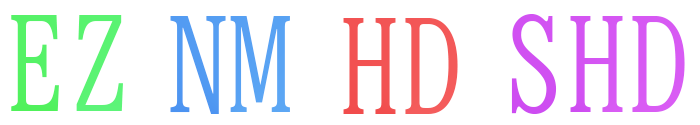
<style>
.page{position:relative;width:700px;height:125px;background:#ffffff}
.page>*{position:absolute;margin:0}
.t1{font:126px "BIZ-UDMincho-Medium";color:#57f26a}
.t2{font:126px "BIZ-UDMincho-Medium";color:#56a0f3}
.t3{font:126px "BIZ-UDMincho-Medium";color:#d556f3}
.t4{font:126px "BIZ-UDMincho-Medium";color:#f25555}
</style>
<div class="page">
<p class="t1" style="left:11px;top:15px;width:112px;height:96px">EZ</p>
<p class="t2" style="left:170px;top:16px;width:120px;height:98px">NM</p>
<p class="t3" style="left:511px;top:14px;width:174px;height:100px">SHD</p>
<p class="t4" style="left:343px;top:18px;width:115px;height:96px">HD</p>
</div>
